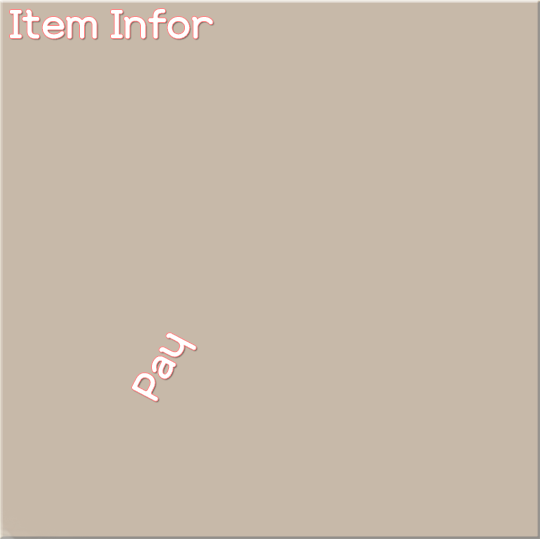
<style>
.page{position:relative;width:540px;height:539px;background:#c7b9a9}
.page>*{position:absolute;margin:0}
.t1{font:50px "YanoljaYacheR";color:#ffffff}
.t2{font:49.9px "YanoljaYacheR";color:#ffffff}
</style>
<div class="page">
<p class="t1" style="left:10px;top:9px;width:203px;height:30px">Item Infor</p>
<p class="t2" style="left:132px;top:333px;width:64px;height:68px;rotate:-63deg">Pay</p>
</div>
